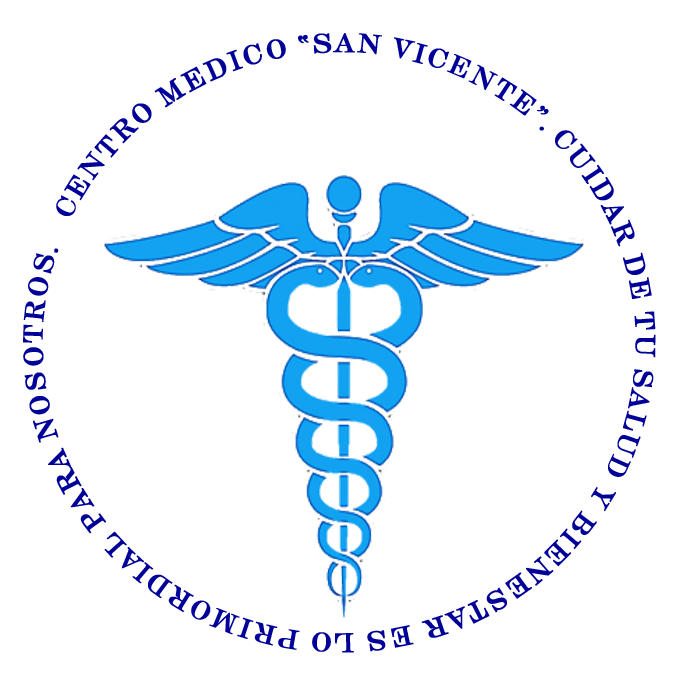
<style>
.page{position:relative;width:674px;height:677px;background:#ffffff}
.page>*{position:absolute;margin:0}
.t1{font:25.1px/62.8px "RichmondHillW90-TwoRegular";letter-spacing:0.09em;color:#000099;font-weight:bold}
</style>
<div class="page">
<p class="t1" style="left:23px;top:33px;width:633px;height:620px">CENTRO MEDICO “SAN VICENTE”. CUIDAR DE TU SALUD Y BIENESTAR ES LO PRIMORDIAL PARA NOSOTROS.</p>
</div>
